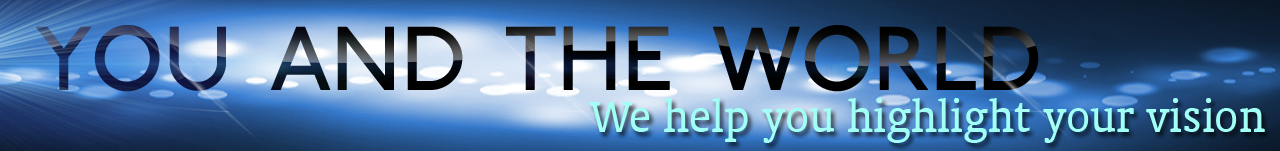
<style>
.page{position:relative;width:1280px;height:151px}
.page>*{position:absolute;margin:0}
.t1{font:137.1px "P22JohnstonUnderground";font-variant:small-caps}
.t2{font:50.1px "OrandaBT-Roman";color:#a2fff5}
</style>
<div class="page">
<p class="t1" style="left:36px;top:25px;width:1003px;height:67px">you and the world</p>
<p class="t2" style="left:589px;top:98px;width:676px;height:45px">We help you highlight your vision</p>
</div>
